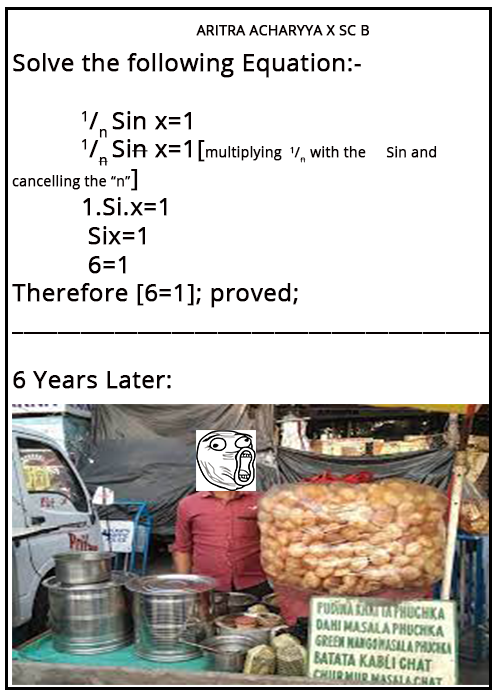
<style>
.page{position:relative;width:500px;height:700px;background:#ffffff}
.page>*{position:absolute;margin:0}
.t1{font:14px "OpenSans-Regular";color:#060000;font-weight:bold}
.t2{font:24px "OpenSans-Regular";color:#060000;font-weight:bold}
</style>
<div class="page">
<p class="t1" style="left:196px;top:25px;width:173px;height:11px">ARITRA ACHARYYA X SC B</p>
<p class="t2" style="left:12px;top:53px;width:479px;height:336px">Solve the following Equation:-<br>     <br>          1/n Sin x=1<br>          1/n Sin x=1[<span class="t1">multiplying  1/n  with the     Sin and cancelling the “n”</span>]<br>          1.Si.x=1<br>           Six=1<br>           6=1<br>Therefore [6=1]; proved;<br>__________________________________________<br><br>6 Years Later:</p>
</div>
